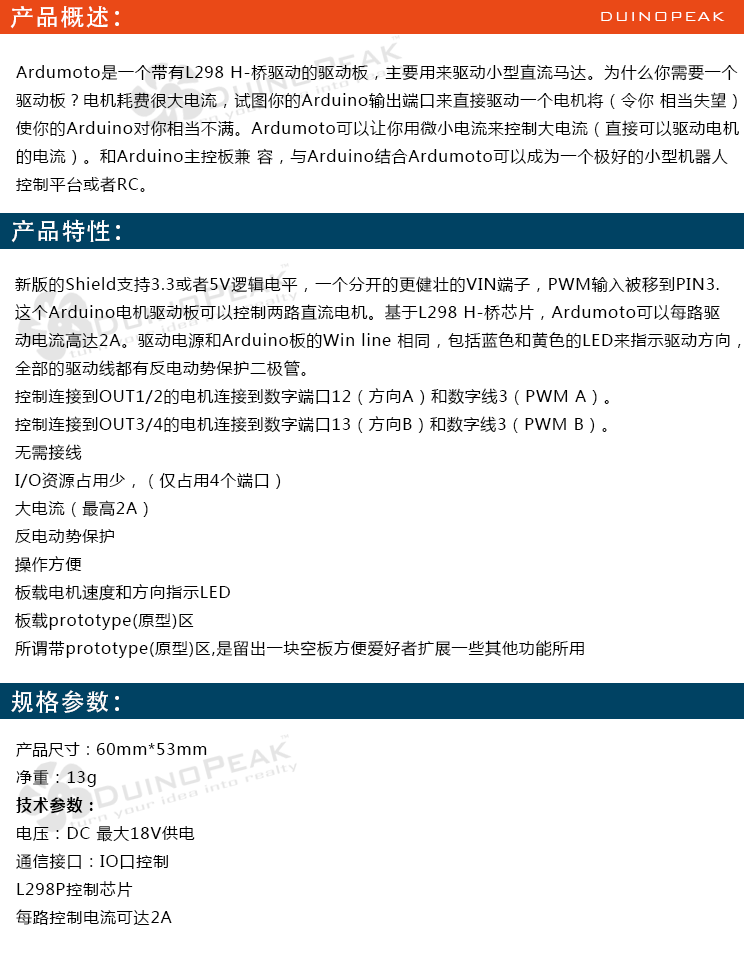
<style>
.page{position:relative;width:744px;height:960px;background:#ffffff}
.page>*{position:absolute;margin:0}
.t1{font:24px "AdobeHeitiStd-Regular";letter-spacing:0.05em;color:#ffffff}
.t2{font:18px "BankGothicBT-Light";letter-spacing:0.05em;color:#ffffff}
.t3{font:16px "MicrosoftYaHei";letter-spacing:0.05em;color:#000000}
.t4{font:16px "MicrosoftYaHei";color:#000000}
.t5{font:16px "MicrosoftYaHei-Bold";letter-spacing:0.05em;color:#000000}
</style>
<div class="page">
<p class="t1" style="left:10px;top:6px;width:109px;height:23px">产品概述：</p>
<p class="t2" style="left:601px;top:12px;width:124px;height:9px">DUINOPEAK</p>
<p class="t3" style="left:16px;top:64px;width:723px;height:129px">Ardumoto是一个带有L298 H-桥驱动的驱动板，主要用来驱动小型直流马达。为什么你需要一个<br>驱动板？电机耗费很大电流，试图你的Arduino输出端口来直接驱动一个电机将（令你 相当失望）<br>使你的Arduino对你相当不满。Ardumoto可以让你用微小电流来控制大电流（直接可以驱动电机<br>的电流）。和Arduino主控板兼 容，与Arduino结合Ardumoto可以成为一个极好的小型机器人<br>控制平台或者RC。</p>
<p class="t1" style="left:11px;top:219px;width:109px;height:24px">产品特性：</p>
<p class="t3" style="left:15px;top:276px;width:726px;height:382px">新版的Shield支持3.3或者5V逻辑电平，一个分开的更健壮的VIN端子，PWM输入被移到PIN3.<br>这个Arduino电机驱动板可以控制两路直流电机。基于L298 H-桥芯片，Ardumoto可以每路驱<br>动电流高达2A。驱动电源和Arduino板的Win line 相同，包括蓝色和黄色的LED来指示驱动方向，<br>全部的驱动线都有反电动势保护二极管。<br>控制连接到OUT1/2的电机连接到数字端口12（方向A）和数字线3（PWM A）。<br>控制连接到OUT3/4的电机连接到数字端口13（方向B）和数字线3（PWM B）。<br>无需接线<br>I/O资源占用少，（仅占用4个端口）<br>大电流（最高2A）<br>反电动势保护<br>操作方便<br>板载电机速度和方向指示LED<br>板载prototype(原型)区<br>所谓带prototype(原型)区,是留出一块空板方便爱好者扩展一些其他功能所用</p>
<p class="t1" style="left:11px;top:690px;width:108px;height:23px">规格参数：</p>
<p class="t3" style="left:16px;top:742px;width:191px;height:183px"><span class="t4">产品尺寸：</span>60mm*53mm<br>净重：13g<br><span class="t5">技术参数：<br></span>电压：DC 最大18V供电<br>通信接口：IO口控制<br>L298P控制芯片<br>每路控制电流可达2A</p>
</div>
